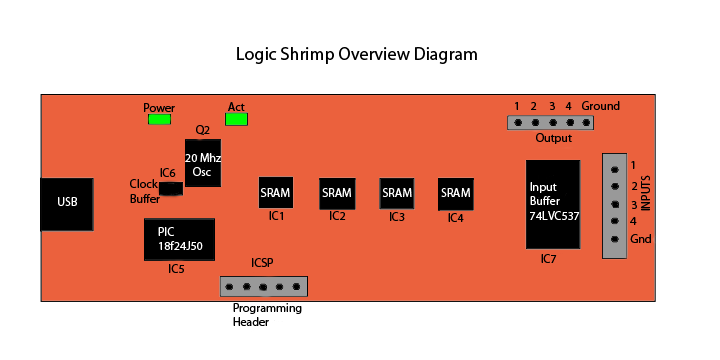
<style>
.page{position:relative;width:720px;height:360px;background:#ffffff}
.page>*{position:absolute;margin:0}
.t1{font:18px "MyriadPro-Regular";color:#000000}
.t2{font:12px "MyriadPro-Regular";color:#000000}
.t3{font:12px "MyriadPro-Regular";color:#ffffff}
.t4{font:12px "MyriadPro-Regular";color:#fcfcfc}
</style>
<div class="page">
<p class="t1" style="left:237px;top:47px;width:240px;height:17px">Logic Shrimp Overview Diagram</p>
<p class="t2" style="left:515px;top:101px;width:105px;height:9px">1    2     3    4    Ground</p>
<p class="t2" style="left:144px;top:103px;width:31px;height:9px">Power</p>
<p class="t2" style="left:196px;top:125px;width:14px;height:10px">Q2</p>
<p class="t2" style="left:536px;top:133px;width:36px;height:11px">Output</p>
<p class="t3" style="left:185px;top:153px;width:36px;height:23px">20 Mhz<br>   Osc</p>
<p class="t2" style="left:631px;top:161px;width:4px;height:8px">1</p>
<p class="t2" style="left:160px;top:168px;width:16px;height:9px">IC6</p>
<p class="t2" style="left:130px;top:179px;width:30px;height:24px">Clock<br>Buffer</p>
<p class="t3" style="left:530px;top:182px;width:50px;height:38px">Input<br>Buffer<br>74LVC537</p>
<p class="t2" style="left:632px;top:182px;width:6px;height:8px">2</p>
<p class="t2" style="left:641px;top:175px;width:9px;height:36px;rotate:-90deg">INPUTS</p>
<p class="t3" style="left:58px;top:197px;width:19px;height:9px">USB</p>
<p class="t4" style="left:260px;top:188px;width:30px;height:9px">SRAM</p>
<p class="t4" style="left:322px;top:188px;width:29px;height:9px">SRAM</p>
<p class="t4" style="left:382px;top:188px;width:30px;height:9px">SRAM</p>
<p class="t4" style="left:441px;top:188px;width:29px;height:9px">SRAM</p>
<p class="t2" style="left:631px;top:201px;width:6px;height:8px">3</p>
<p class="t2" style="left:269px;top:211px;width:14px;height:9px">IC1</p>
<p class="t2" style="left:330px;top:211px;width:16px;height:9px">IC2</p>
<p class="t2" style="left:390px;top:212px;width:15px;height:9px">IC3</p>
<p class="t2" style="left:630px;top:217px;width:7px;height:8px">4</p>
<p class="t3" style="left:158px;top:227px;width:45px;height:23px">PIC<br>18f24J50</p>
<p class="t2" style="left:541px;top:254px;width:16px;height:9px">IC7</p>
<p class="t2" style="left:169px;top:264px;width:15px;height:9px">IC5</p>
<p class="t2" style="left:252px;top:258px;width:21px;height:9px">ICSP</p>
<p class="t2" style="left:233px;top:303px;width:69px;height:23px">Programming<br>Header</p>
</div>
